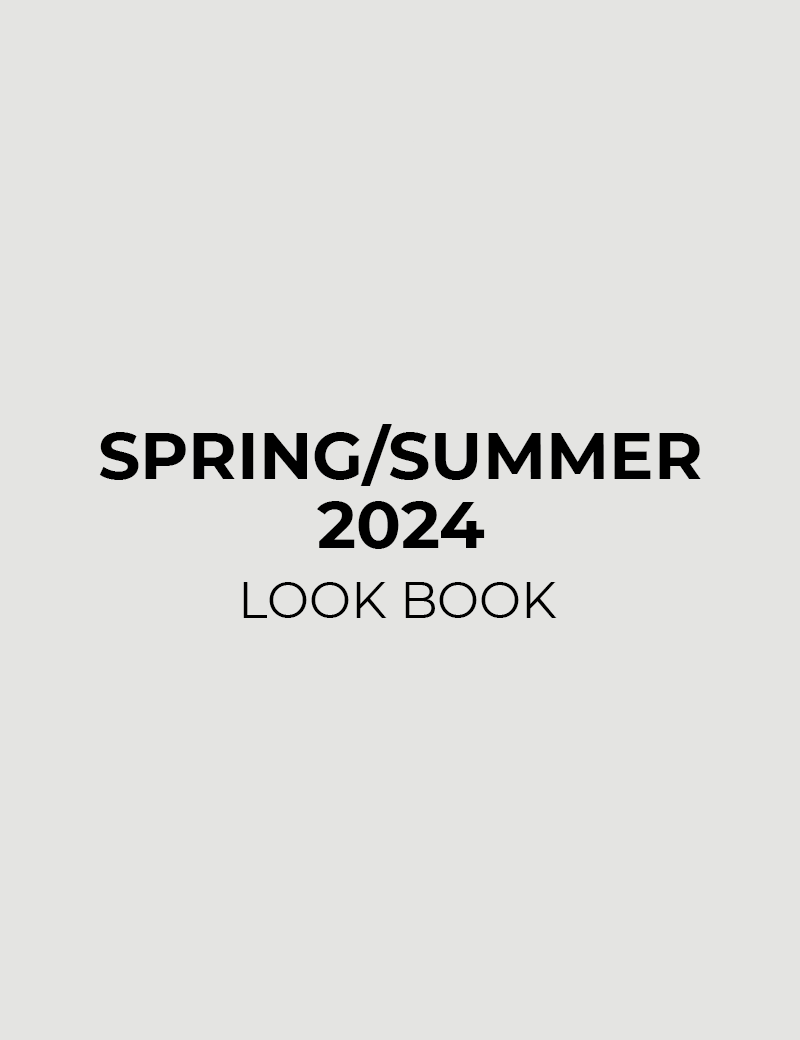
<style>
.page{position:relative;width:800px;height:1040px;background:#e4e4e2}
.page>*{position:absolute;margin:0}
.t1{font:66.3px "Montserrat-Bold";color:#000000;text-transform:uppercase}
.t2{font:50px "Montserrat-Regular";color:#000000;text-transform:uppercase}
</style>
<div class="page">
<p class="t1" style="left:99px;top:424px;width:602px;height:62px">Spring/summer</p>
<p class="t1" style="left:317px;top:501px;width:168px;height:48px">2024</p>
<p class="t2" style="left:243px;top:582px;width:314px;height:36px">look book</p>
</div>
